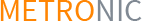
<style>
.page{position:relative;width:142px;height:21px;background:#ffffff}
.page>*{position:absolute;margin:0}
.t1{font:32px "SourceSansPro-Regular";color:#ff8503}
.t2{font:32px "SourceSansPro-Regular";color:#808993}
</style>
<div class="page">
<p class="t1" style="left:0px;top:0px;width:142px;height:21px">METRO<span class="t2">NIC</span></p>
</div>
